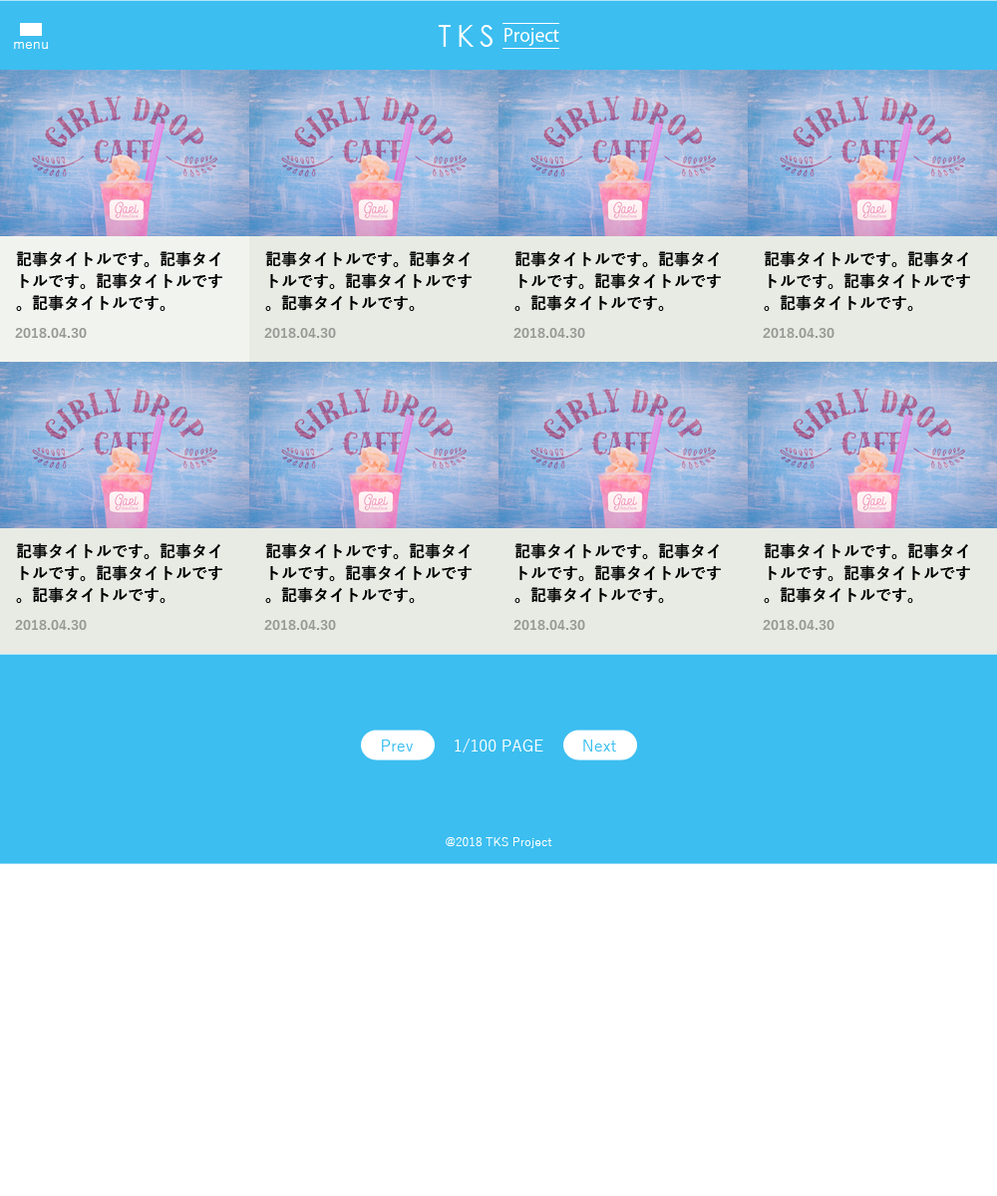
<style>
.page{position:relative;width:997px;height:1196px;background:#ffffff}
.page>*{position:absolute;margin:0}
.t1{font:29.9px "CenturyGothic";letter-spacing:0.18em;color:#ffffff}
.t2{font:17.9px "KozGoPr6N-Regular";color:#ffffff}
.t3{font:14px "YuGothic-Regular";color:#ffffff}
.t4{font:15.9px/21.9px "YuGothic-Bold";color:#000000}
.t5{font:14px "YuGothic-Bold";color:#979994}
.t6{font:15.9px "YuGothic-Regular";color:#3cbef0}
.t7{font:15.9px "YuGothic-Regular";color:#ffffff}
.t8{font:12px "YuGothic-Regular";color:#ffffff}
</style>
<div class="page">
<p class="t1" style="left:438px;top:25px;width:55px;height:22px">TKS</p>
<p class="t2" style="left:504px;top:28px;width:55px;height:18px">Project</p>
<p class="t3" style="left:14px;top:42px;width:34px;height:7px">menu</p>
<p class="t4" style="left:16px;top:251px;width:206px;height:60px">記事タイトルです。記事タイトルです。記事タイトルです。記事タイトルです。</p>
<p class="t4" style="left:265px;top:251px;width:207px;height:60px">記事タイトルです。記事タイトルです。記事タイトルです。記事タイトルです。</p>
<p class="t4" style="left:514px;top:251px;width:207px;height:60px">記事タイトルです。記事タイトルです。記事タイトルです。記事タイトルです。</p>
<p class="t4" style="left:764px;top:251px;width:206px;height:60px">記事タイトルです。記事タイトルです。記事タイトルです。記事タイトルです。</p>
<p class="t5" style="left:15px;top:328px;width:72px;height:10px">2018.04.30</p>
<p class="t5" style="left:264px;top:328px;width:72px;height:10px">2018.04.30</p>
<p class="t5" style="left:513px;top:328px;width:72px;height:10px">2018.04.30</p>
<p class="t5" style="left:763px;top:328px;width:71px;height:10px">2018.04.30</p>
<p class="t4" style="left:16px;top:543px;width:206px;height:60px">記事タイトルです。記事タイトルです。記事タイトルです。記事タイトルです。</p>
<p class="t4" style="left:265px;top:543px;width:207px;height:60px">記事タイトルです。記事タイトルです。記事タイトルです。記事タイトルです。</p>
<p class="t4" style="left:514px;top:543px;width:207px;height:60px">記事タイトルです。記事タイトルです。記事タイトルです。記事タイトルです。</p>
<p class="t4" style="left:764px;top:543px;width:206px;height:60px">記事タイトルです。記事タイトルです。記事タイトルです。記事タイトルです。</p>
<p class="t5" style="left:15px;top:620px;width:72px;height:10px">2018.04.30</p>
<p class="t5" style="left:264px;top:620px;width:72px;height:10px">2018.04.30</p>
<p class="t5" style="left:513px;top:620px;width:72px;height:10px">2018.04.30</p>
<p class="t5" style="left:763px;top:620px;width:71px;height:10px">2018.04.30</p>
<p class="t6" style="left:382px;top:740px;width:31px;height:12px">Prev</p>
<p class="t7" style="left:455px;top:739px;width:88px;height:14px">1/100 PAGE</p>
<p class="t6" style="left:583px;top:740px;width:33px;height:12px">Next</p>
<p class="t8" style="left:446px;top:837px;width:106px;height:11px">@2018 TKS Project</p>
</div>
